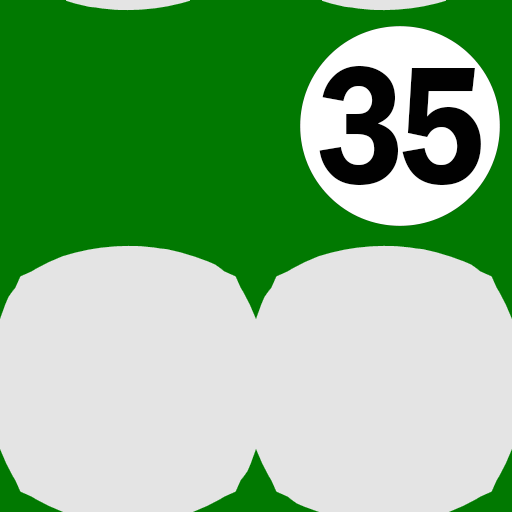
<style>
.page{position:relative;width:512px;height:512px;background:#e4e4e4}
.page>*{position:absolute;margin:0}
.t1{font:172.5px "FranklinGothic-Demi";letter-spacing:-0.05em;color:#010101;scale:0.87 1}
</style>
<div class="page">
<p class="t1" style="left:319px;top:66px;width:162px;height:119px">35</p>
</div>
